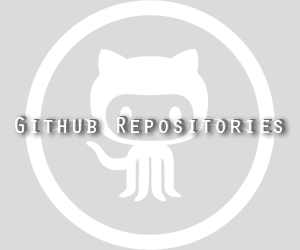
<style>
.page{position:relative;width:300px;height:250px;background:#dbdbdb}
.page>*{position:absolute;margin:0}
.t1{font:24px "OratorStd";color:#ffffff}
.t2{font:24px "OratorStd";color:#6f6f6f}
</style>
<div class="page">
<p class="t1" style="left:15px;top:117px;width:267px;height:16px">Github Repositories</p>
<p class="t2" style="left:18px;top:116px;width:267px;height:16px">Github Repositories</p>
</div>
